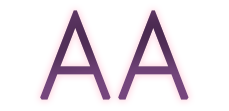
<style>
.page{position:relative;width:229px;height:111px;background:#ffffff}
.page>*{position:absolute;margin:0}
.t1{font:118px "GeosansLight";color:#663c6d;font-weight:bold}
</style>
<div class="page">
<p class="t1" style="left:40px;top:10px;width:149px;height:90px">AA</p>
</div>
